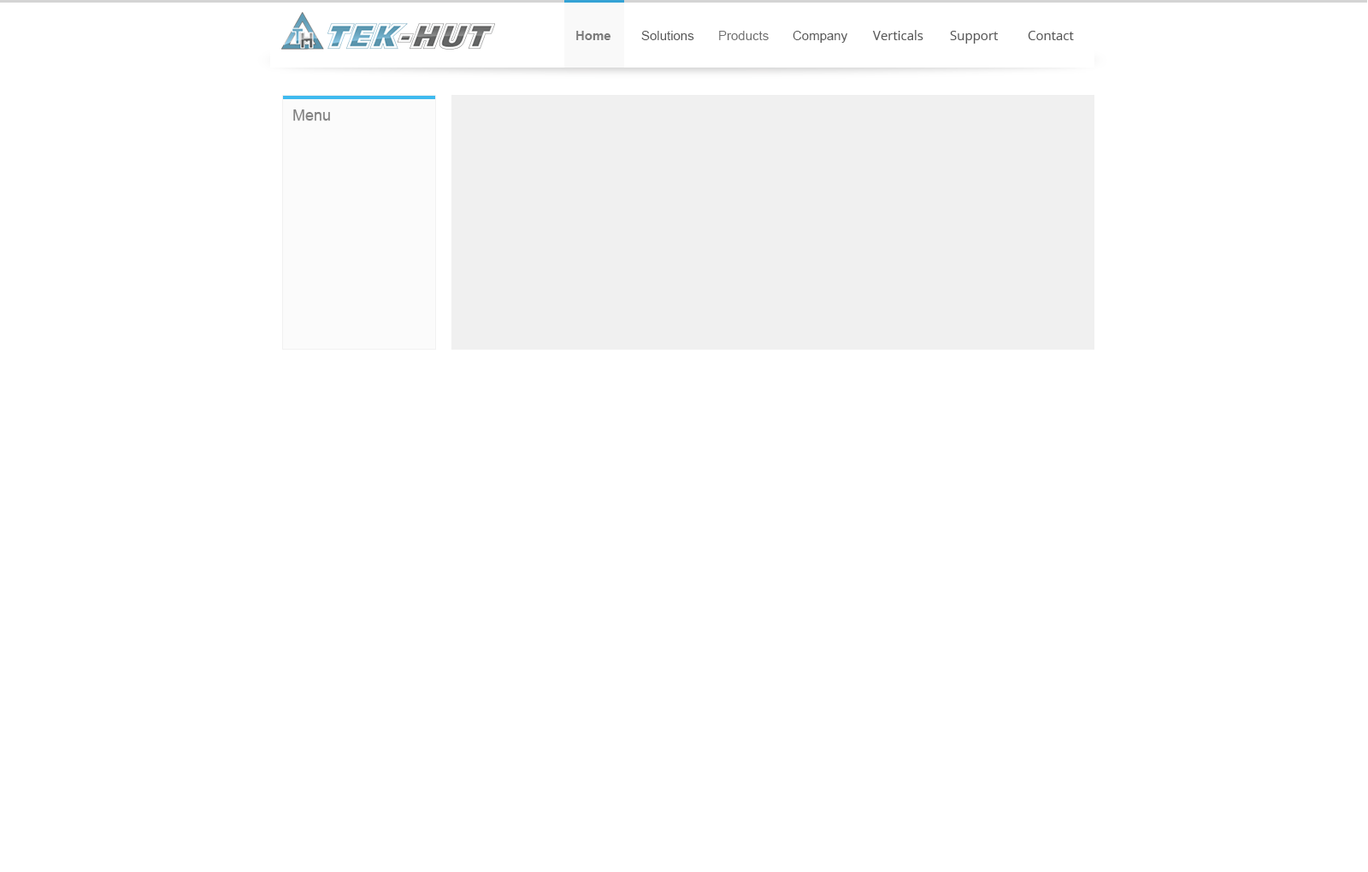
<style>
.page{position:relative;width:1368px;height:872px;background:#ffffff}
.page>*{position:absolute;margin:0}
.t1{font:12.8px "OpenSans";color:#585858}
.t2{font:12.8px "Arial-BoldMT";color:#7b7b7b}
.t3{font:12.8px "ArialMT";color:#555555}
.t4{font:12.8px "ArialMT";color:#6f6f6f}
.t5{font:12.8px "ArialMT";color:#585858}
.t6{font:15.4px "ArialMT";color:#838383}
</style>
<div class="page">
<p class="t1" style="left:873px;top:30px;width:50px;height:10px">Verticals</p>
<p class="t2" style="left:576px;top:31px;width:35px;height:9px">Home</p>
<p class="t3" style="left:641px;top:31px;width:53px;height:9px">Solutions</p>
<p class="t4" style="left:719px;top:31px;width:49px;height:9px">Products</p>
<p class="t5" style="left:792px;top:31px;width:55px;height:12px">Company</p>
<p class="t1" style="left:950px;top:31px;width:48px;height:13px">Support</p>
<p class="t1" style="left:1027px;top:31px;width:47px;height:9px">Contact</p>
<p class="t6" style="left:293px;top:109px;width:37px;height:12px">Menu</p>
</div>
